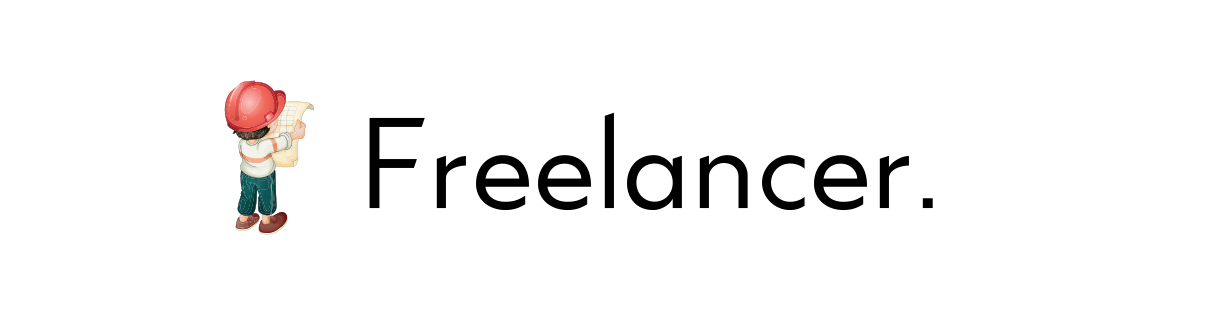
<style>
.page{position:relative;width:1220px;height:315px;background:#ffffff}
.page>*{position:absolute;margin:0}
.t1{font:216.3px "Kano-regular";color:#000000}
</style>
<div class="page">
<p class="t1" style="left:369px;top:112px;width:564px;height:99px">Freelancer.</p>
</div>
